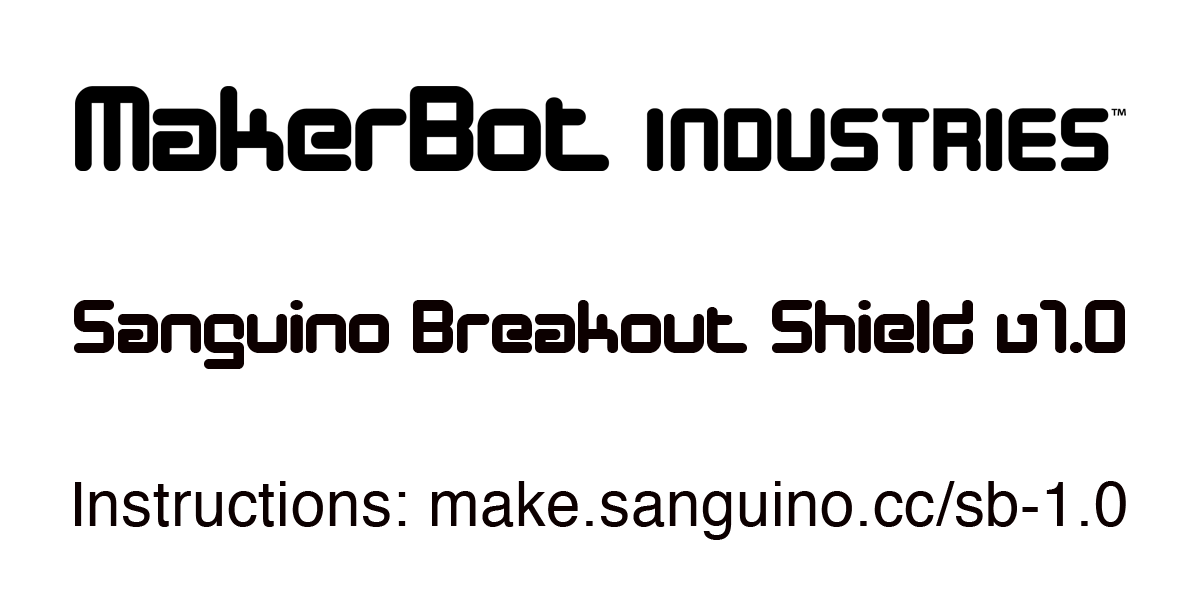
<style>
.page{position:relative;width:1200px;height:600px;background:#ffffff}
.page>*{position:absolute;margin:0}
.t1{font:77.7px "DesignerBlock";letter-spacing:0.01em;color:#0c0000}
.t2{font:61.8px "Helvetica";letter-spacing:0.01em;color:#0c0000}
</style>
<div class="page">
<p class="t1" style="left:74px;top:300px;width:1051px;height:69px">Sanguino Breakout Shield v1.0</p>
<p class="t2" style="left:75px;top:481px;width:1051px;height:59px">Instructions: make.sanguino.cc/sb-1.0</p>
</div>
